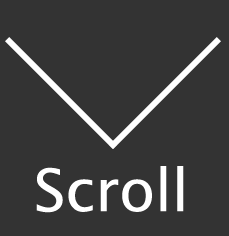
<style>
.page{position:relative;width:229px;height:236px;background:#333333}
.page>*{position:absolute;margin:0}
.t1{font:58.3px "LucidaSansUnicode";color:#ffffff}
</style>
<div class="page">
<p class="t1" style="left:36px;top:166px;width:148px;height:47px">Scroll</p>
</div>
